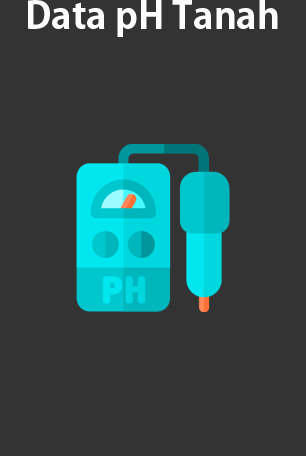
<style>
.page{position:relative;width:306px;height:456px;background:#333333}
.page>*{position:absolute;margin:0}
.t1{font:37.4px "AdobeGothicStd-Bold";color:#fefcfc}
</style>
<div class="page">
<p class="t1" style="left:28px;top:0px;width:250px;height:37px">Data pH Tanah</p>
</div>
